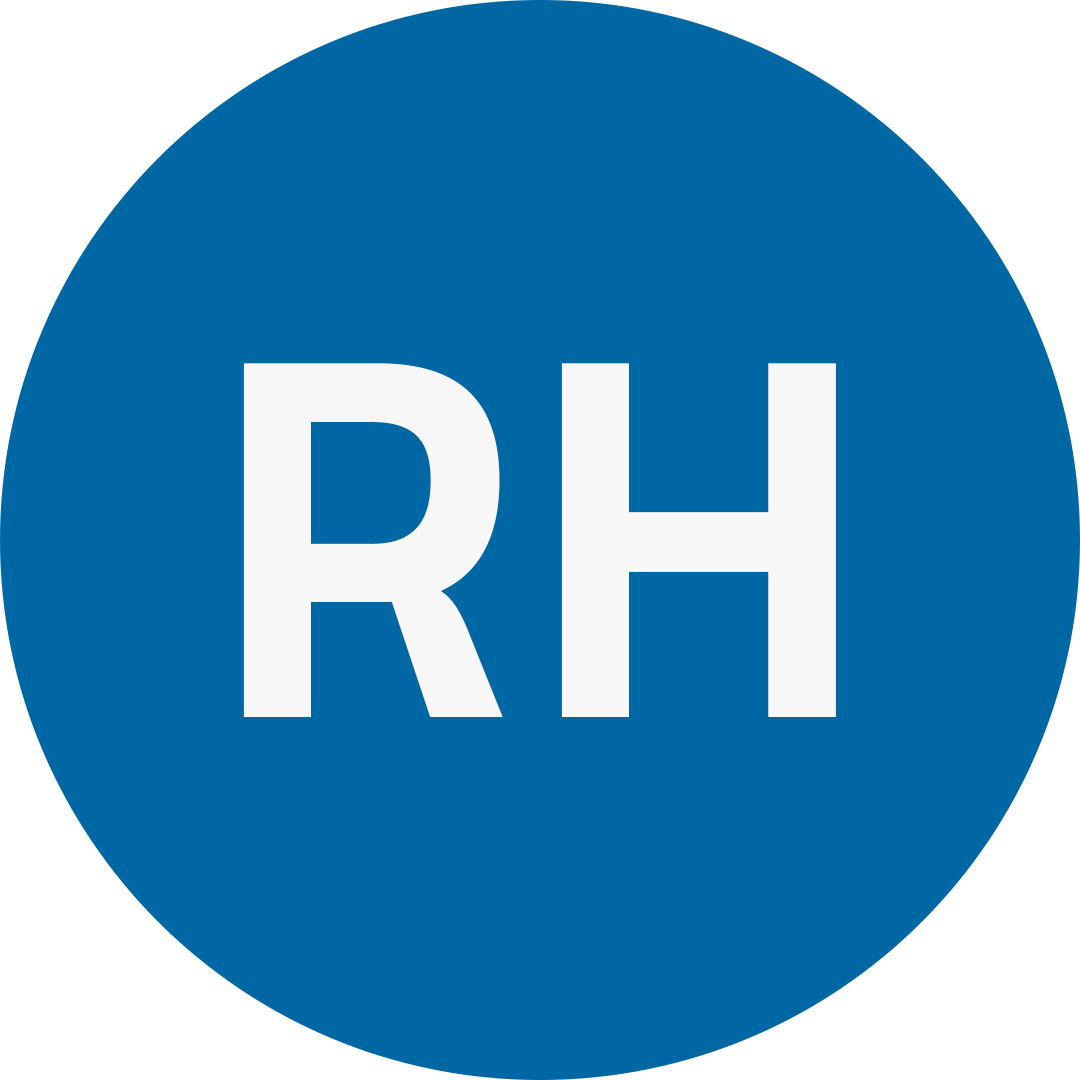
<style>
.page{position:relative;width:1080px;height:1080px;background:#0067a5}
.page>*{position:absolute;margin:0}
.t1{font:527.8px "Modam-SemiBold";color:#f8f7f7}
</style>
<div class="page">
<p class="t1" style="left:243px;top:363px;width:593px;height:354px">RH</p>
</div>
